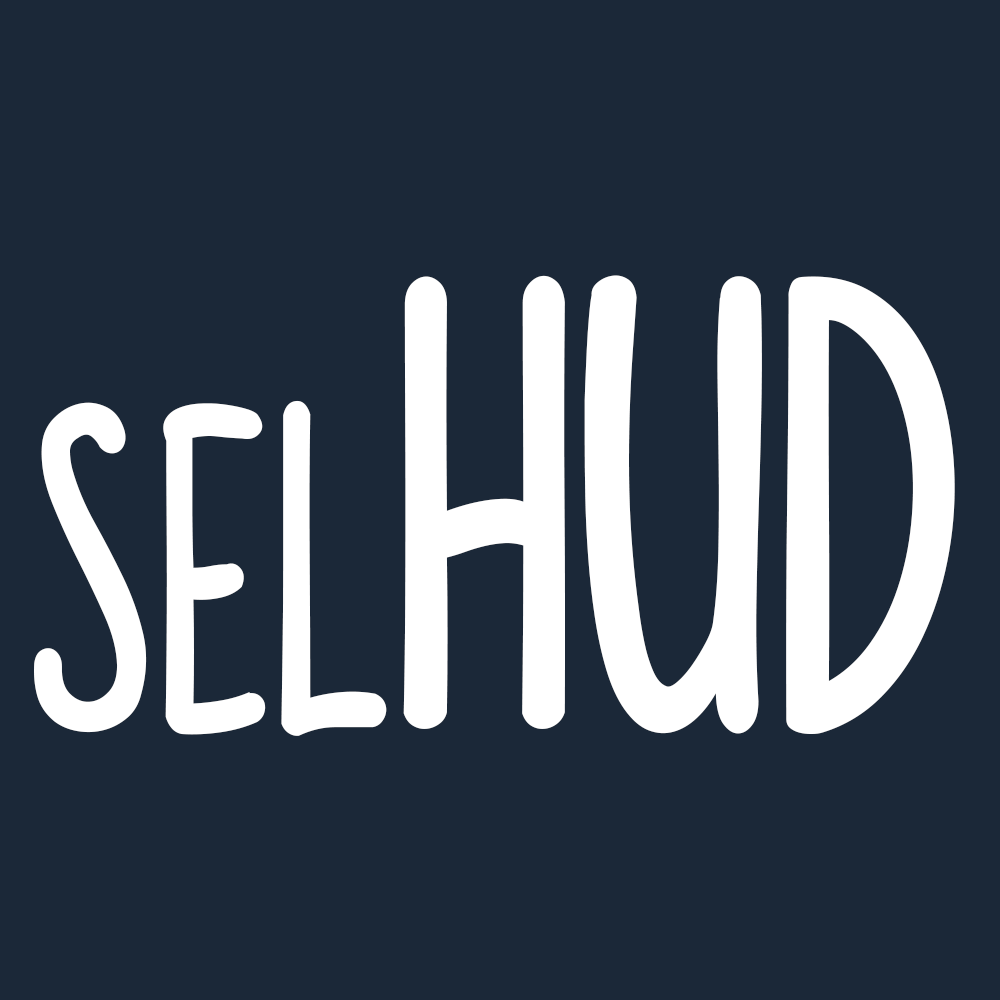
<style>
.page{position:relative;width:1000px;height:1000px;background:#1b2838}
.page>*{position:absolute;margin:0}
.t1{font:574.9px "Photographs";color:#ffffff}
</style>
<div class="page">
<p class="t1" style="left:34px;top:275px;width:921px;height:461px">selHUD</p>
</div>
